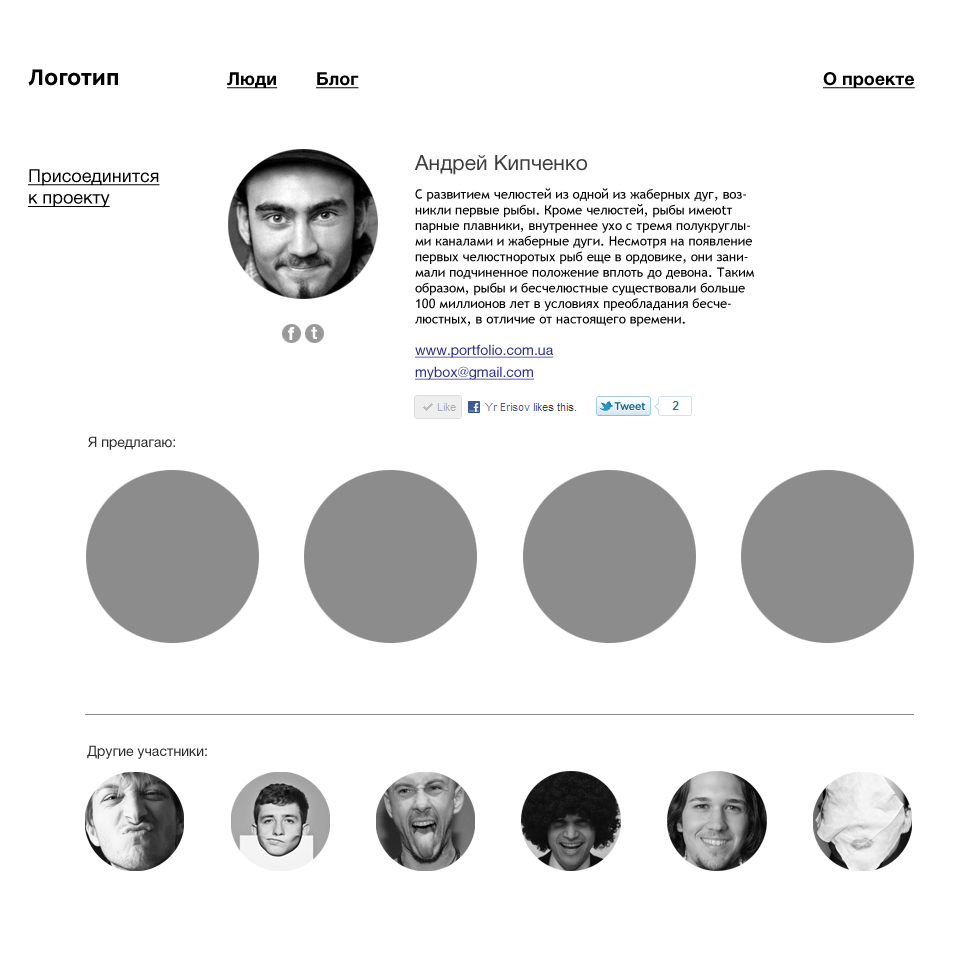
<style>
.page{position:relative;width:960px;height:965px;background:#ffffff}
.page>*{position:absolute;margin:0}
.t1{font:24px "OksanaSansNarrow-Bold";color:#000000}
.t2{font:18px "HelveticaNeueLTCYR-Bold";color:#000000;text-decoration:underline}
.t3{font:21px "HelveticaNeueLTCYR-Roman";color:#3d3d3d}
.t4{font:18px "HelveticaNeueLTCYR-Roman";color:#000000;text-decoration:underline}
.t5{font:13px "TrebuchetMS";color:#000000}
.t6{font:18px "HelveticaNeueLTCYR-Bold";color:#fefefe}
.t7{font:14px "HelveticaNeueLTCYR-Roman";color:#2e3192;text-decoration:underline}
.t8{font:14px "HelveticaNeueLTCYR-Roman";color:#2c2c2c}
</style>
<div class="page">
<p class="t1" style="left:28px;top:69px;width:90px;height:17px">Логотип</p>
<p class="t2" style="left:227px;top:72px;width:51px;height:17px">Люди</p>
<p class="t2" style="left:316px;top:72px;width:43px;height:17px">Блог</p>
<p class="t2" style="left:823px;top:72px;width:92px;height:17px">О проекте</p>
<p class="t3" style="left:414px;top:155px;width:173px;height:20px">Андрей Кипченко</p>
<p class="t4" style="left:28px;top:169px;width:132px;height:39px">Присоединится<br>к проекту</p>
<p class="t5" style="left:415px;top:188px;width:339px;height:139px">С развитием челюстей из одной из жаберных дуг, возникли первые рыбы. Кроме челюстей, рыбы имеюtт парные плавники, внутреннее ухо с тремя полукруглыми каналами и жаберные дуги. Несмотря на появление первых челюстноротых рыб еще в ордовике, они занимали подчиненное положение вплоть до девона. Таким образом, рыбы и бесчелюстные существовали больше 100 миллионов лет в условиях преобладания бесчелюстных, в отличие от настоящего времени.</p>
<p class="t6" style="left:288px;top:327px;width:7px;height:13px">f</p>
<p class="t6" style="left:311px;top:327px;width:6px;height:12px">t</p>
<p class="t7" style="left:415px;top:344px;width:139px;height:14px">www.portfolio.com.ua</p>
<p class="t7" style="left:415px;top:366px;width:119px;height:14px">mybox@gmail.com</p>
<p class="t8" style="left:88px;top:436px;width:87px;height:14px">Я предлагаю:</p>
<p class="t8" style="left:87px;top:745px;width:120px;height:14px">Другие участники:</p>
</div>
